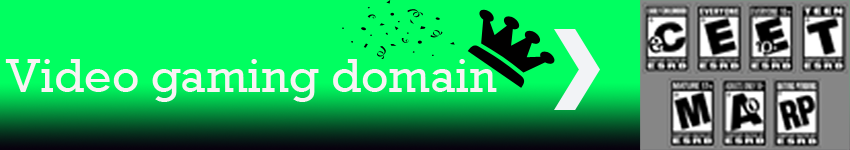
<style>
.page{position:relative;width:850px;height:150px;background:#00ff60}
.page>*{position:absolute;margin:0}
.t1{font:48px "Rockwell";color:#f8f3f4}
</style>
<div class="page">
<p class="t1" style="left:5px;top:59px;width:492px;height:43px">Video gaming domain</p>
</div>
